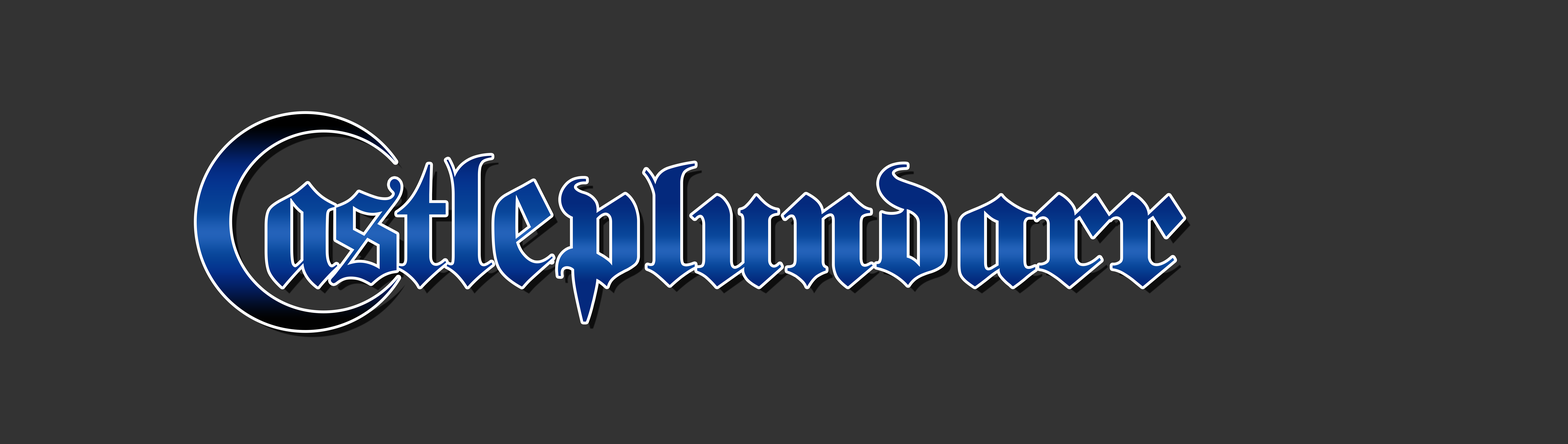
<style>
.page{position:relative;width:1568px;height:444px;background:#333333}
.page>*{position:absolute;margin:0}
.t1{font:166.5px "FetteUNZFraktur";color:#063d91}
</style>
<div class="page">
<p class="t1" style="left:558px;top:163px;width:625px;height:159px">plundarr</p>
</div>
